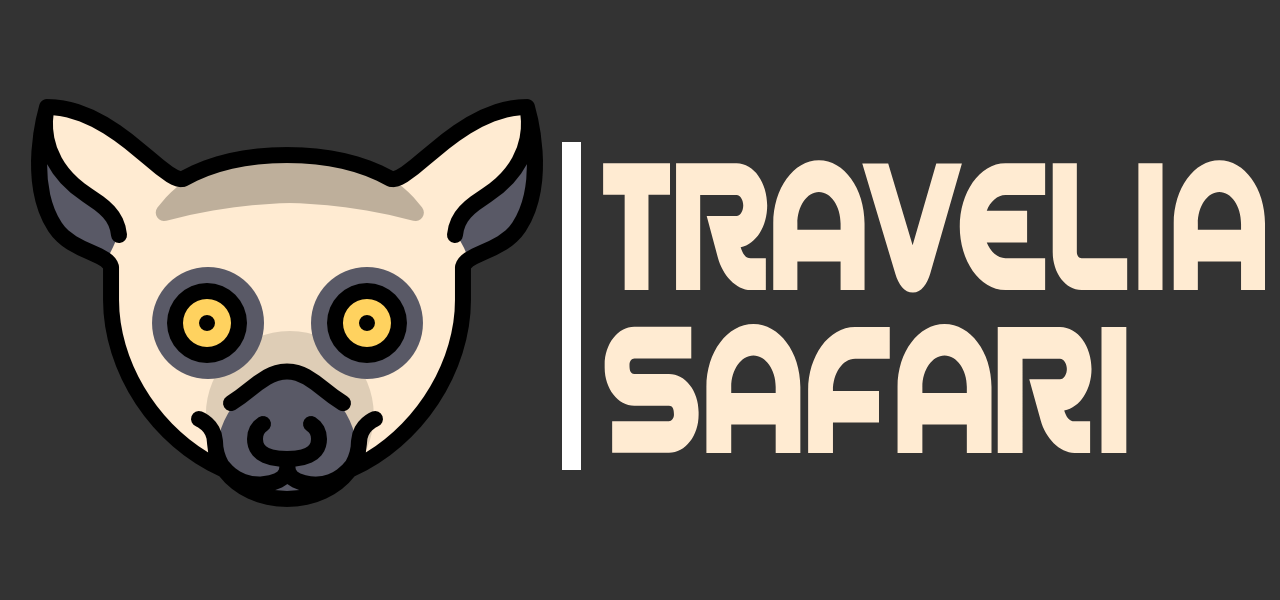
<style>
.page{position:relative;width:1280px;height:600px;background:#333333}
.page>*{position:absolute;margin:0}
.t1{font:200.2px "SpinCycleOT";color:#ffebd2;scale:0.76 1}
.t2{font:199px "SpinCycleOT";color:#ffebd2;scale:0.78 1}
</style>
<div class="page">
<p class="t1" style="left:603px;top:160px;width:663px;height:133px">TRAVELIA</p>
<p class="t2" style="left:604px;top:324px;width:523px;height:129px">SAFARI</p>
</div>
